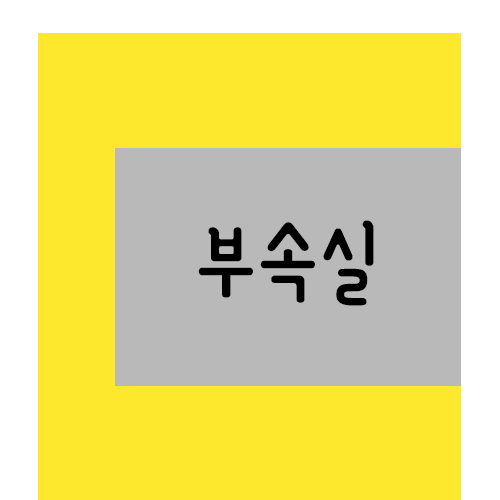
<style>
.page{position:relative;width:500px;height:500px;background:#fee82d}
.page>*{position:absolute;margin:0}
.t1{font:100px "YanoljaYacheR";color:#000000}
</style>
<div class="page">
<p class="t1" style="left:198px;top:220px;width:176px;height:86px">부속실</p>
</div>
